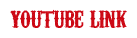
<style>
.page{position:relative;width:137px;height:38px;background:#ffffff}
.page>*{position:absolute;margin:0}
.t1{font:30px "CarnivaleeFreakshow";letter-spacing:-0.035em;color:#cc0814}
</style>
<div class="page">
<p class="t1" style="left:10px;top:9px;width:117px;height:19px">youtube link</p>
</div>
